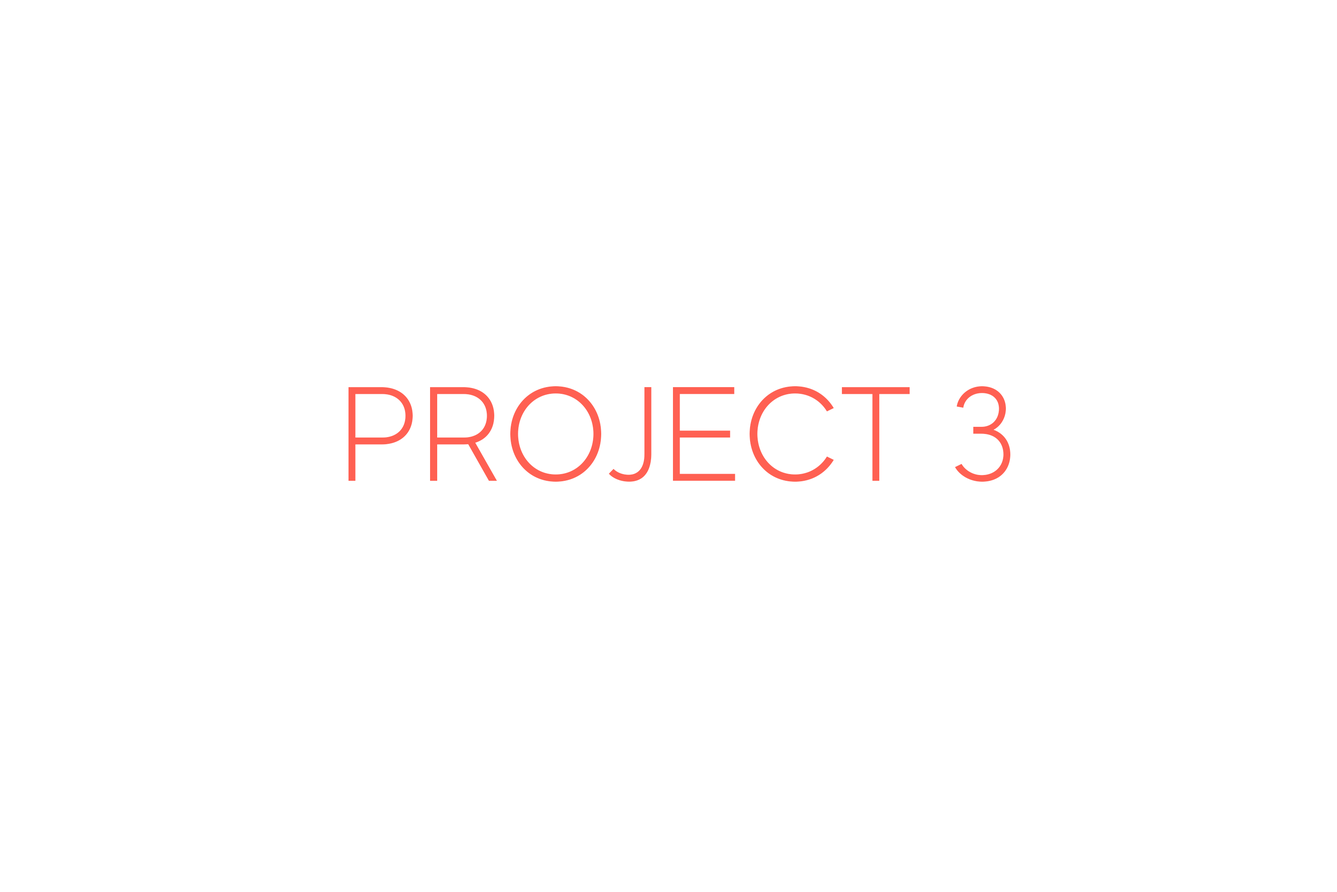
<style>
.page{position:relative;width:1337px;height:892px;background:#ffffff}
.page>*{position:absolute;margin:0}
.t1{font:133.7px "MADEEvolveSans-Light";color:#ff6052}
</style>
<div class="page">
<p class="t1" style="left:349px;top:386px;width:662px;height:96px">PROJECT 3</p>
</div>
